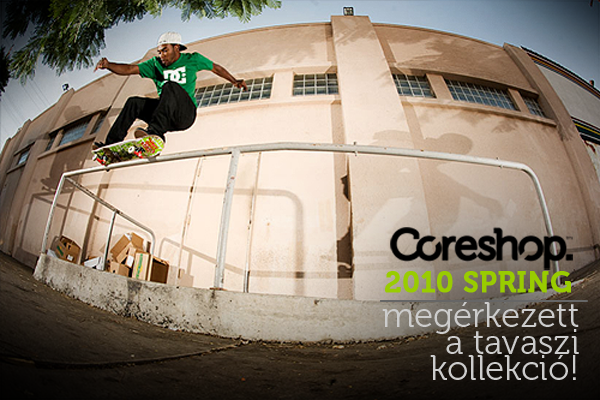
<style>
.page{position:relative;width:600px;height:400px}
.page>*{position:absolute;margin:0}
.t1{font:28.8px "Museo-700";color:#99cc00;font-weight:bold}
.t2{font:34.7px/26.4px "Museo-300";color:#cccccc}
</style>
<div class="page">
<p class="t1" style="left:385px;top:271px;width:186px;height:22px">2010 SPRING</p>
<p class="t2" style="left:382px;top:302px;width:197px;height:78px;text-align:right">megérkezett<br>a tavaszi<br>kollekció!</p>
</div>
